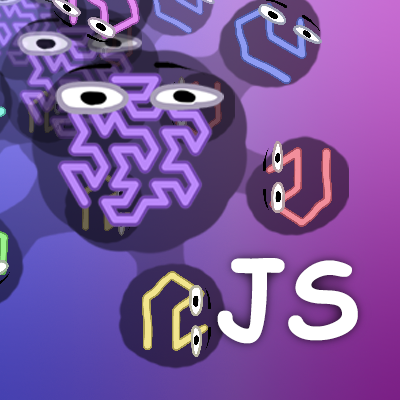
<style>
.page{position:relative;width:400px;height:400px}
.page>*{position:absolute;margin:0}
.t1{font:106.7px "ComicSansMS-Bold";color:#ffffff}
</style>
<div class="page">
<p class="t1" style="left:217px;top:258px;width:141px;height:86px">JS</p>
</div>
